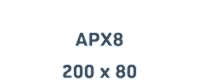
<style>
.page{position:relative;width:200px;height:80px;background:#ffffff}
.page>*{position:absolute;margin:0}
.t1{font:17px "Jalnan"}
</style>
<div class="page">
<p class="t1" style="left:74px;top:31px;width:51px;height:17px">APX8</p>
<p class="t1" style="left:61px;top:63px;width:77px;height:17px">200 x 80</p>
</div>
